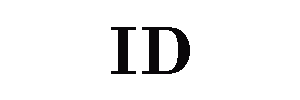
<style>
.page{position:relative;width:300px;height:100px;background:#ffffff}
.page>*{position:absolute;margin:0}
.t1{font:70px "BodoniMT";color:#090709;font-weight:bold}
</style>
<div class="page">
<p class="t1" style="left:111px;top:27px;width:79px;height:47px">ID</p>
</div>
